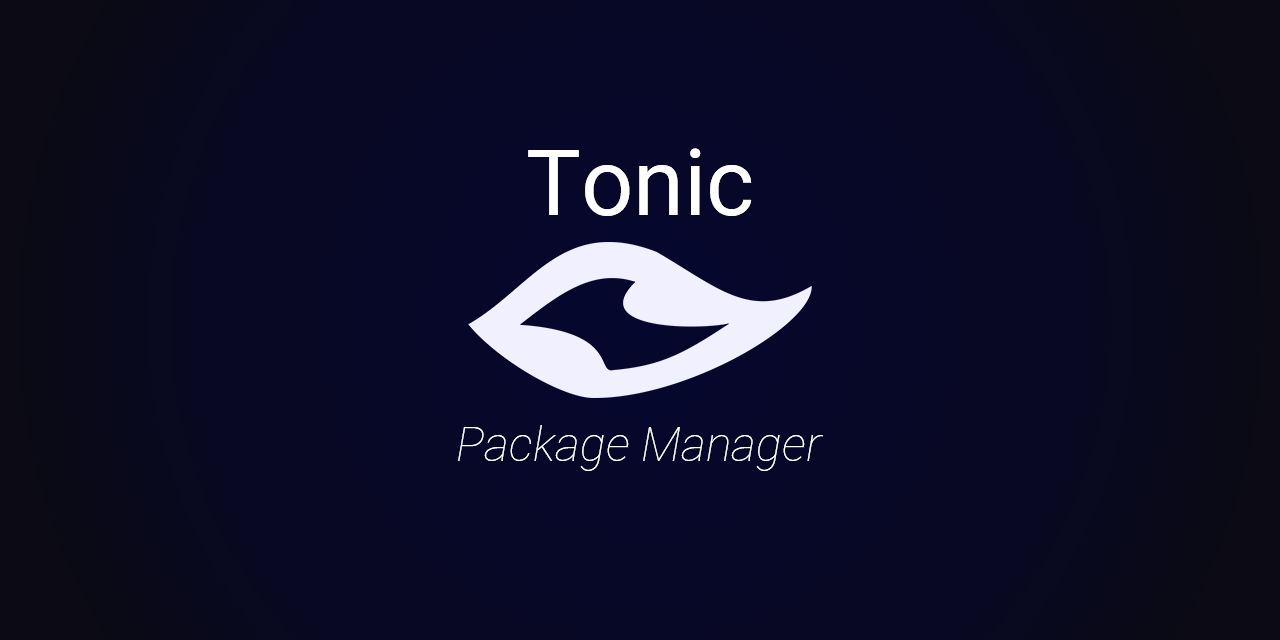
<style>
.page{position:relative;width:1280px;height:640px}
.page>*{position:absolute;margin:0}
.t1{font:92px "Roboto-Regular";color:#ffffff}
.t2{font:48px "Roboto-ThinItalic";color:#ffffff}
</style>
<div class="page">
<p class="t1" style="left:528px;top:148px;width:224px;height:68px">Tonic</p>
<p class="t2" style="left:458px;top:425px;width:365px;height:46px">Package Manager</p>
</div>
